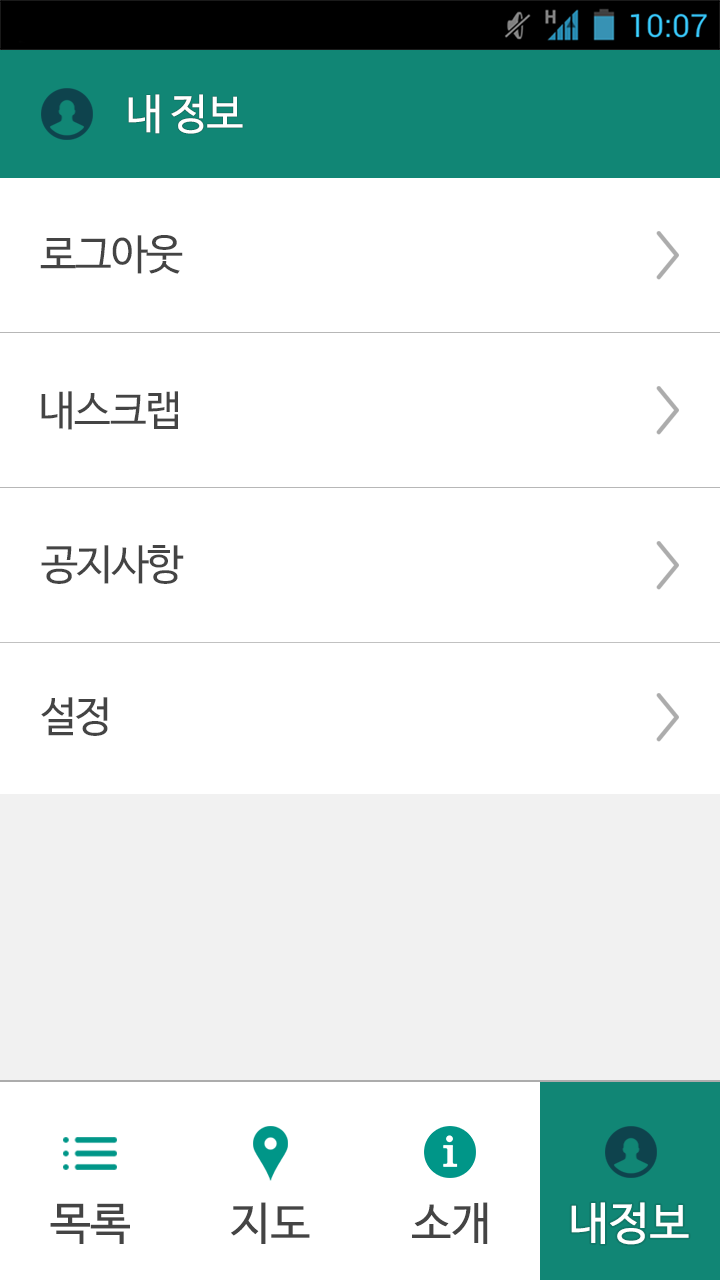
<style>
.page{position:relative;width:720px;height:1280px;background:#ffffff}
.page>*{position:absolute;margin:0}
.t1{font:42px "NanumBarunGothicOTF";letter-spacing:-0.02em;color:#ffffff}
.t2{font:42px "NanumBarunGothicOTF";letter-spacing:-0.03em;color:#444444}
.t3{font:45px "NanumBarunGothicOTF";color:#444444}
.t4{font:45px "NanumBarunGothicOTF";color:#ffffff}
</style>
<div class="page">
<p class="t1" style="left:128px;top:94px;width:115px;height:40px">내 정보</p>
<p class="t2" style="left:40px;top:235px;width:143px;height:39px">로그아웃</p>
<p class="t2" style="left:41px;top:391px;width:137px;height:39px">내스크랩</p>
<p class="t2" style="left:41px;top:545px;width:143px;height:39px">공지사항</p>
<p class="t2" style="left:41px;top:697px;width:67px;height:39px">설정</p>
<p class="t3" style="left:50px;top:1203px;width:80px;height:41px">목록</p>
<p class="t3" style="left:231px;top:1202px;width:79px;height:42px">지도</p>
<p class="t3" style="left:412px;top:1202px;width:76px;height:42px">소개</p>
<p class="t4" style="left:571px;top:1202px;width:118px;height:43px">내정보</p>
</div>
